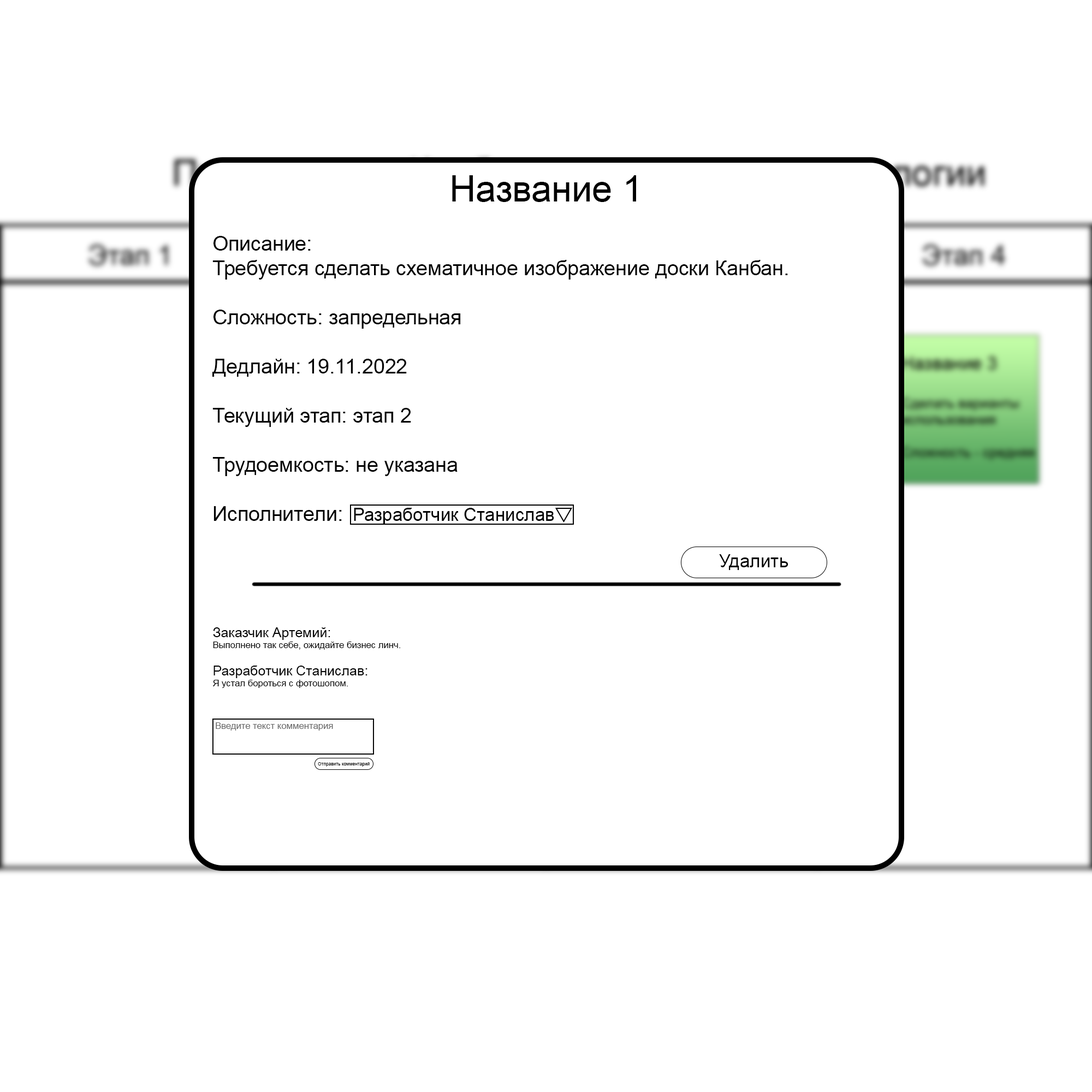
<style>
.page{position:relative;width:1092px;height:1092px;background:#ffffff}
.page>*{position:absolute;margin:0}
.t1{font:20.5px "ArialMT";color:#000000}
.t2{font:36.4px "ArialMT";color:#000000}
.t3{font:18.2px "ArialMT";color:#000000}
.t4{font:9.1px "ArialMT";color:#000000}
.t5{font:13.6px "ArialMT";color:#000000}
.t6{font:9.1px "ArialMT";color:#696969}
.t7{font:4.5px "ArialMT";color:#000000}
</style>
<div class="page">
<p class="t1" style="left:212px;top:175px;width:576px;height:346px;text-align:center"><span class="t2">Название 1<br></span><br>Описание:<br>Требуется сделать схематичное изображение доски Канбан.<br><br>Сложность: запредельная<br><br>Дедлайн: 19.11.2022<br><br>Текущий этап: этап 2<br><br>Трудоемкость: не указана<br><br>Исполнители:</p>
<p class="t3" style="left:354px;top:508px;width:200px;height:17px">Разработчик Станислав</p>
<p class="t3" style="left:719px;top:554px;width:69px;height:16px">Удалить</p>
<p class="t4" style="left:213px;top:627px;width:188px;height:61px"><span class="t5">Заказчик Артемий:<br></span>Выполнено так себе, ожидайте бизнес линч.<br><br><span class="t5">Разработчик Станислав:<br></span>Я устал бороться с фотошопом.</p>
<p class="t6" style="left:216px;top:722px;width:117px;height:9px">Введите текст комментария</p>
<p class="t7" style="left:318px;top:762px;width:52px;height:5px">Отправить комментарий</p>
</div>
